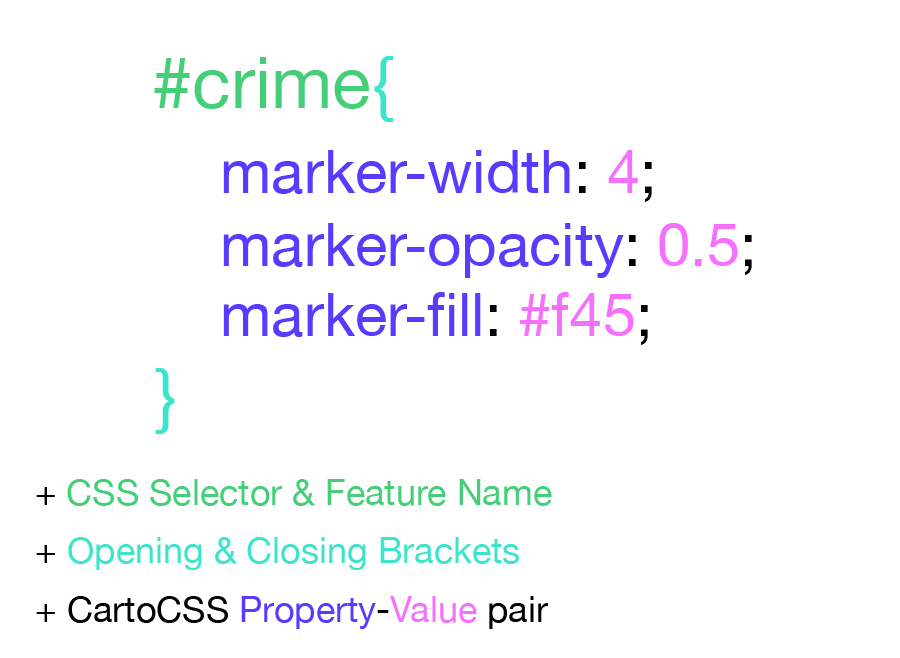
<style>
.page{position:relative;width:900px;height:658px;background:#ffffff}
.page>*{position:absolute;margin:0}
.t1{font:72px "HelveticaNeue";color:#45ce78}
.t2{font:72px "HelveticaNeue";color:#3be4ca}
.t3{font:60px "HelveticaNeue";color:#573bff}
.t4{font:60px "HelveticaNeue";color:#000000}
.t5{font:60px "HelveticaNeue";color:#f76fff}
.t6{font:72px "HelveticaNeue";color:#3be5cb}
.t7{font:36px "HelveticaNeue";color:#45ce78}
.t8{font:36px "HelveticaNeue";color:#000000}
.t9{font:36px "HelveticaNeue";color:#3be4ca}
.t10{font:36px "HelveticaNeue";color:#573bff}
.t11{font:36px "HelveticaNeue";color:#f76fff}
</style>
<div class="page">
<p class="t1" style="left:154px;top:56px;width:240px;height:66px">#crime<span class="t2">{</span></p>
<p class="t3" style="left:223px;top:150px;width:429px;height:52px">marker-width<span class="t4">: </span><span class="t5">4</span><span class="t4">;</span></p>
<p class="t3" style="left:223px;top:223px;width:529px;height:55px">marker-opacity<span class="t4">: </span><span class="t5">0.5</span><span class="t4">;</span></p>
<p class="t3" style="left:223px;top:292px;width:425px;height:53px">marker-fill<span class="t4">: </span><span class="t5">#f45</span><span class="t4">;</span></p>
<p class="t6" style="left:155px;top:368px;width:20px;height:66px">}</p>
<p class="t7" style="left:36px;top:479px;width:516px;height:27px"><span class="t8">+ </span>CSS Selector &amp; Feature Name</p>
<p class="t9" style="left:36px;top:537px;width:483px;height:33px"><span class="t8">+</span> Opening &amp; Closing Brackets</p>
<p class="t8" style="left:36px;top:596px;width:512px;height:33px">+ CartoCSS <span class="t10">Property</span>-<span class="t11">Value </span>pair</p>
</div>
